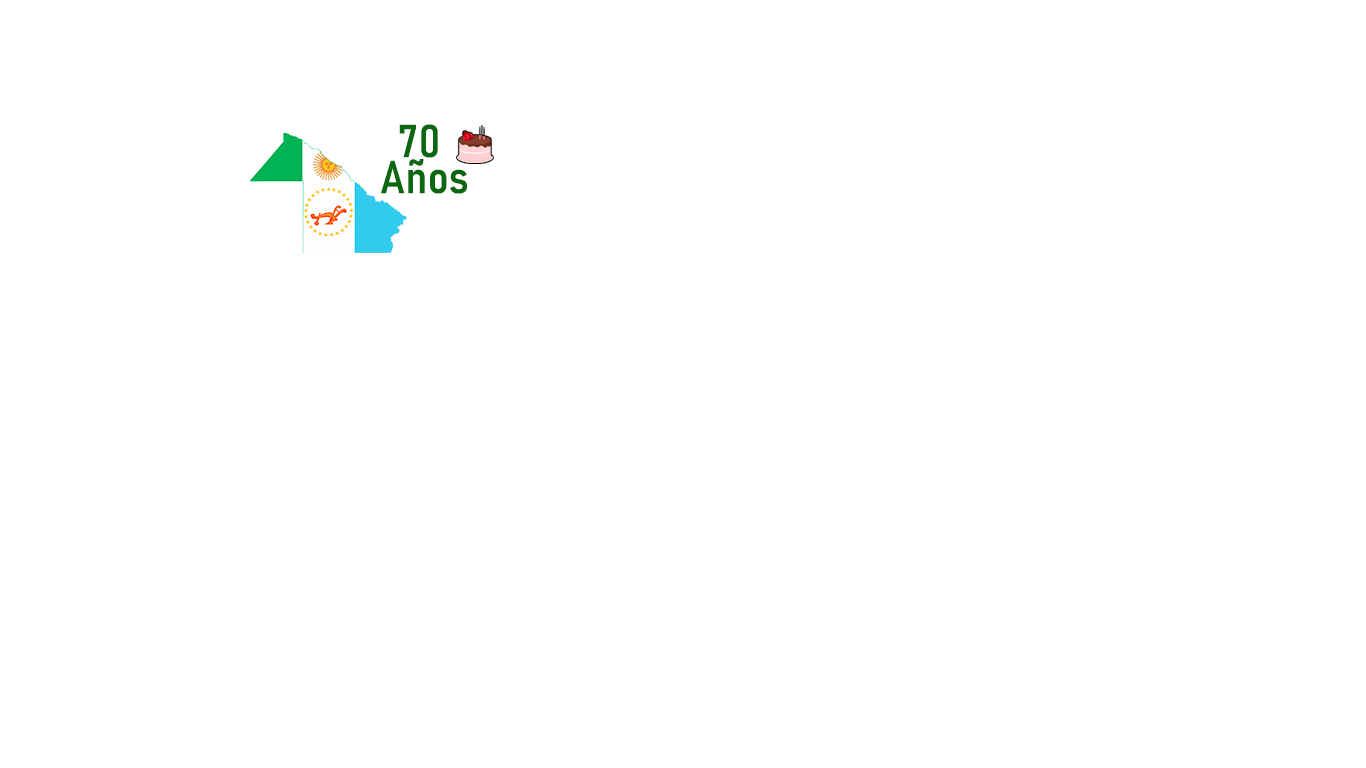
<style>
.page{position:relative;width:1366px;height:768px;background:#ffffff}
.page>*{position:absolute;margin:0}
.t1{font:45.9px/18px "Bahnschrift_531.000wght_87.000wdth";letter-spacing:0.005em;color:#0b6710}
</style>
<div class="page">
<p class="t1" style="left:381px;top:124px;width:86px;height:70px;text-align:center">70 <br><br>Años</p>
</div>
